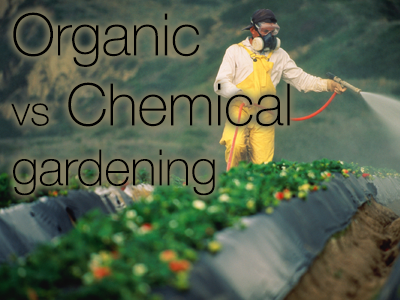
<style>
.page{position:relative;width:400px;height:300px}
.page>*{position:absolute;margin:0}
.t1{font:50px "HelveticaNeue-Thin";color:#000000}
.t2{font:58.3px "HelveticaNeue-Thin";color:#000000}
.t3{font:41.7px "HelveticaNeue-Thin";color:#000000}
</style>
<div class="page">
<p class="t1" style="left:11px;top:12px;width:279px;height:184px"><span class="t2">Organic<br></span><span class="t3">vs</span><span class="t2"> Chemical<br></span>gardening</p>
</div>
